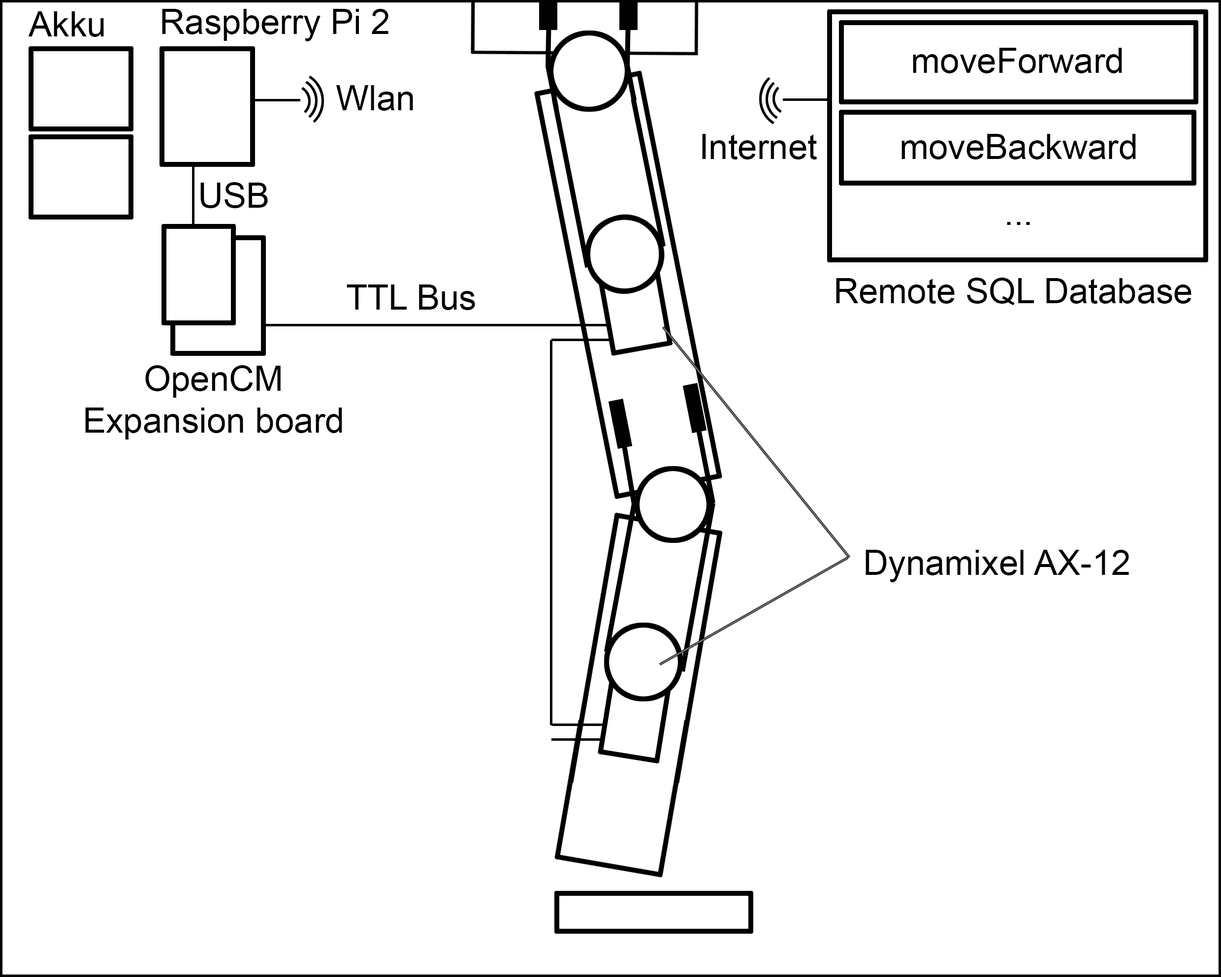
<style>
.page{position:relative;width:1221px;height:977px;background:#ffffff}
.page>*{position:absolute;margin:0}
.t1{font:34.9px "ArialMT";color:#000000}
</style>
<div class="page">
<p class="t1" style="left:28px;top:11px;width:76px;height:26px">Akku</p>
<p class="t1" style="left:162px;top:9px;width:226px;height:32px">Raspberry Pi 2</p>
<p class="t1" style="left:912px;top:48px;width:210px;height:25px">moveForward</p>
<p class="t1" style="left:336px;top:85px;width:77px;height:26px">Wlan</p>
<p class="t1" style="left:702px;top:134px;width:115px;height:25px">Internet</p>
<p class="t1" style="left:901px;top:134px;width:234px;height:25px">moveBackward</p>
<p class="t1" style="left:200px;top:182px;width:68px;height:26px">USB</p>
<p class="t1" style="left:1006px;top:222px;width:24px;height:3px">...</p>
<p class="t1" style="left:836px;top:278px;width:355px;height:27px">Remote SQL Database</p>
<p class="t1" style="left:346px;top:284px;width:129px;height:26px">TTL Bus</p>
<p class="t1" style="left:85px;top:365px;width:257px;height:75px;text-align:center">OpenCM<br>Expansion board</p>
<p class="t1" style="left:865px;top:550px;width:264px;height:32px">Dynamixel AX-12</p>
</div>
